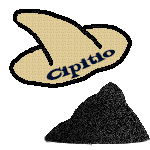
<style>
.page{position:relative;width:150px;height:150px;background:#ffffff}
.page>*{position:absolute;margin:0}
.t1{font:12.5px "LatinWide";color:#001134}
</style>
<div class="page">
<p class="t1" style="left:46px;top:49px;width:69px;height:31px;rotate:-22deg">Cipitio</p>
</div>
